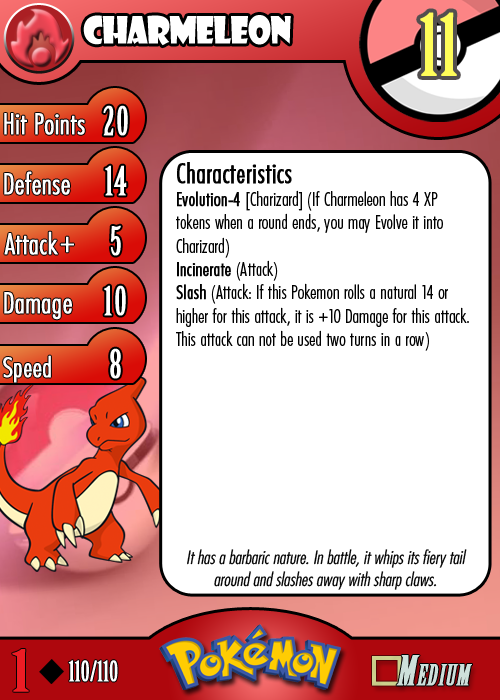
<style>
.page{position:relative;width:500px;height:700px;background:#ffffff}
.page>*{position:absolute;margin:0}
.t1{font:36.7px "ShowcardGothic-Reg";letter-spacing:-0.025em;color:#ffffff;scale:0.91 1}
.t2{font:83.3px "BirchStd";letter-spacing:0.025em;color:#fffd59;font-weight:bold}
.t3{font:27.8px "Futura-CondensedLight";color:#ffffff;font-weight:bold}
.t4{font:38.9px "BirchStd";letter-spacing:0.035em;color:#ffffff;font-weight:bold}
.t5{font:19.4px "FuturaCondensedBQ-Light";color:#010101}
.t6{font:27.8px "FuturaCondensedBQ-Light";color:#010101;font-weight:bold}
.t7{font:19.4px "FuturaCondensedBQ-Light";color:#010101;font-weight:bold}
.t8{font:30.6px "Futura-CondensedLight";color:#ffffff;font-weight:bold}
.t9{font:27.8px "FuturaCondensedBQ-Light";color:#ffffff;font-weight:bold}
.t10{font:18.1px "Futura-CondensedLight";color:#010101;font-style:italic}
.t11{font:55.6px "BirchStd";color:#ed1c24;font-weight:bold;scale:1.5 1}
.t12{font:27.8px "BirchStd";color:#ffffff;font-weight:bold}
</style>
<div class="page">
<p class="t1" style="left:83px;top:15px;width:208px;height:31px">charmeleon</p>
<p class="t2" style="left:420px;top:12px;width:37px;height:64px">11</p>
<p class="t3" style="left:4px;top:113px;width:81px;height:22px">Hit Points</p>
<p class="t4" style="left:103px;top:105px;width:25px;height:31px">20</p>
<p class="t3" style="left:4px;top:171px;width:66px;height:24px">Defense</p>
<p class="t4" style="left:105px;top:165px;width:22px;height:31px">14</p>
<p class="t5" style="left:176px;top:162px;width:293px;height:189px"><span class="t6">Characteristics<br></span><span class="t7">Evolution-4 </span>[Charizard] (If Charmeleon has 4 XP tokens when a round ends, you may Evolve it into Charizard)<br><span class="t7">Incinerate</span> (Attack)<br><span class="t7">Slash</span> (Attack: If this Pokemon rolls a natural 14 or higher for this attack, it is +10 Damage for this attack. This attack can not be used two turns in a row)</p>
<p class="t3" style="left:4px;top:231px;width:54px;height:24px">Attack</p>
<p class="t4" style="left:111px;top:225px;width:10px;height:31px">5</p>
<p class="t8" style="left:60px;top:236px;width:14px;height:17px">+</p>
<p class="t3" style="left:4px;top:292px;width:68px;height:28px">Damage</p>
<p class="t4" style="left:104px;top:285px;width:22px;height:31px">10</p>
<p class="t4" style="left:110px;top:348px;width:11px;height:31px">8</p>
<p class="t9" style="left:3px;top:355px;width:48px;height:28px">Speed</p>
<p class="t10" style="left:187px;top:549px;width:280px;height:41px;text-align:center">It has a barbaric nature. In battle, it whips its fiery tail around and slashes away with sharp claws.</p>
<p class="t11" style="left:12px;top:649px;width:17px;height:43px">1</p>
<p class="t12" style="left:68px;top:660px;width:50px;height:22px">110/110</p>
</div>
